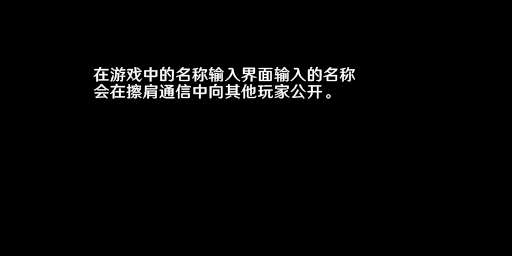
<style>
.page{position:relative;width:512px;height:256px;background:#000000}
.page>*{position:absolute;margin:0}
.t1{font:16px/17.3px "HYWenHei-FEW";letter-spacing:0.025em;color:#ffffff}
</style>
<div class="page">
<p class="t1" style="left:93px;top:66px;width:262px;height:33px">在游戏中的名称输入界面输入的名称<br>会在擦肩通信中向其他玩家公开。</p>
</div>
